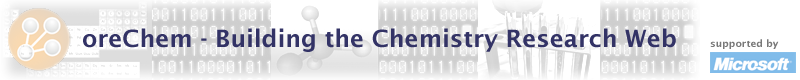
<style>
.page{position:relative;width:800px;height:80px;background:#ffffff}
.page>*{position:absolute;margin:0}
.t1{font:24px "LucidaSans-Demi";color:#333366}
.t2{font:10px "LucidaSans-Demi";color:#787878}
</style>
<div class="page">
<p class="t1" style="left:83px;top:28px;width:593px;height:24px">oreChem - Building the Chemistry Research Web</p>
<p class="t2" style="left:710px;top:39px;width:69px;height:10px">supported by</p>
</div>
